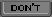
<style>
.page{position:relative;width:52px;height:17px}
.page>*{position:absolute;margin:0}
.t1{font:8.5px "RetroComputer";color:#000000}
</style>
<div class="page">
<p class="t1" style="left:11px;top:3px;width:29px;height:8px">DON'T</p>
</div>
